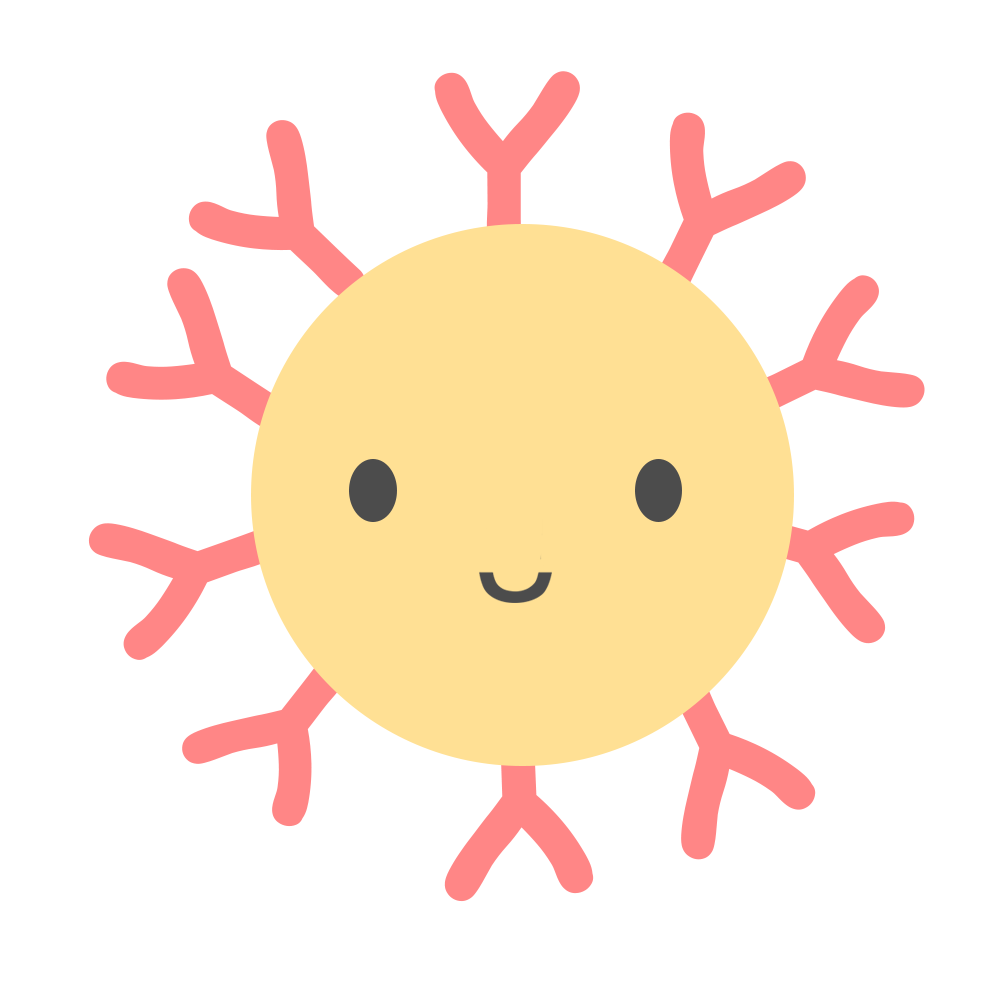
<style>
.page{position:relative;width:1000px;height:1000px;background:#ffffff}
.page>*{position:absolute;margin:0}
.t1{font:250px "ChalkboardSE-Bold";color:#ff8686}
.t2{font:249.7px "ChalkboardSE-Bold";color:#ff8686}
.t3{font:248.2px "ChalkboardSE-Bold";color:#ff8686;scale:0.97 1}
.t4{font:248.3px "ChalkboardSE-Bold";color:#ff8686;scale:0.97 1}
.t5{font:234.5px "ChalkboardSE-Bold";color:#ff8686;scale:1.03 1}
.t6{font:249.8px "ChalkboardSE-Bold";color:#ff8686}
.t7{font:251.4px "ChalkboardSE-Bold";color:#ff8686}
</style>
<div class="page">
<p class="t1" style="left:434px;top:71px;width:146px;height:185px">Y</p>
<p class="t1" style="left:653px;top:112px;width:153px;height:191px;rotate:26deg">Y</p>
<p class="t1" style="left:188px;top:120px;width:178px;height:181px;rotate:-46deg">Y</p>
<p class="t2" style="left:106px;top:268px;width:187px;height:165px;rotate:-56deg">Y</p>
<p class="t3" style="left:733px;top:275px;width:192px;height:145px;rotate:66deg">Y</p>
<p class="t1" style="left:723px;top:501px;width:192px;height:143px;rotate:106deg">Y</p>
<p class="t4" style="left:88px;top:523px;width:193px;height:137px;rotate:-108deg">Y</p>
<p class="t5" style="left:182px;top:656px;width:167px;height:171px;rotate:-145deg">Y</p>
<p class="t6" style="left:669px;top:665px;width:147px;height:195px;rotate:154deg">Y</p>
<p class="t7" style="left:444px;top:712px;width:150px;height:190px;rotate:177deg">Y</p>
</div>
